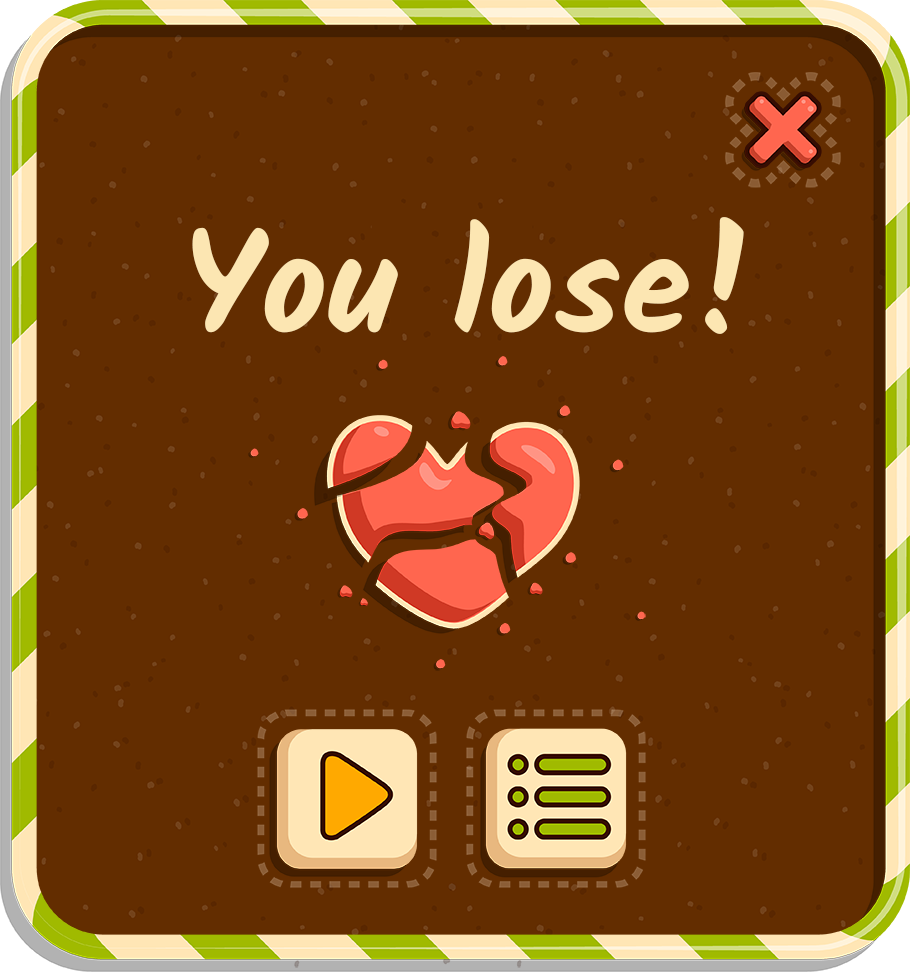
<style>
.page{position:relative;width:910px;height:972px;background:#632d00}
.page>*{position:absolute;margin:0}
.t1{font:142.2px "Kalam-Bold";color:#fce6b2}
</style>
<div class="page">
<p class="t1" style="left:192px;top:217px;width:552px;height:117px">You lose!</p>
</div>
